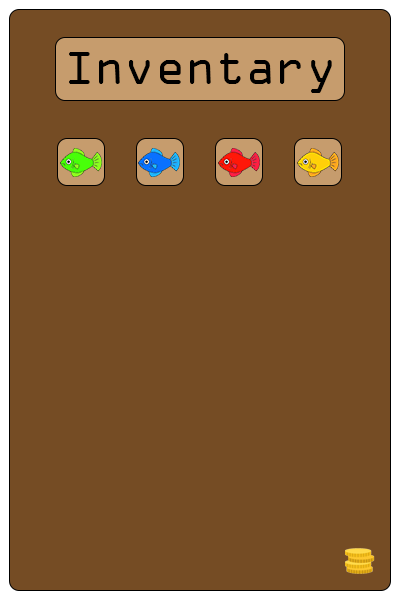
<style>
.page{position:relative;width:400px;height:600px;background:#754c24}
.page>*{position:absolute;margin:0}
.t1{font:50px "OCRAExtended";color:#000000}
</style>
<div class="page">
<p class="t1" style="left:69px;top:52px;width:263px;height:41px">Inventary</p>
</div>
